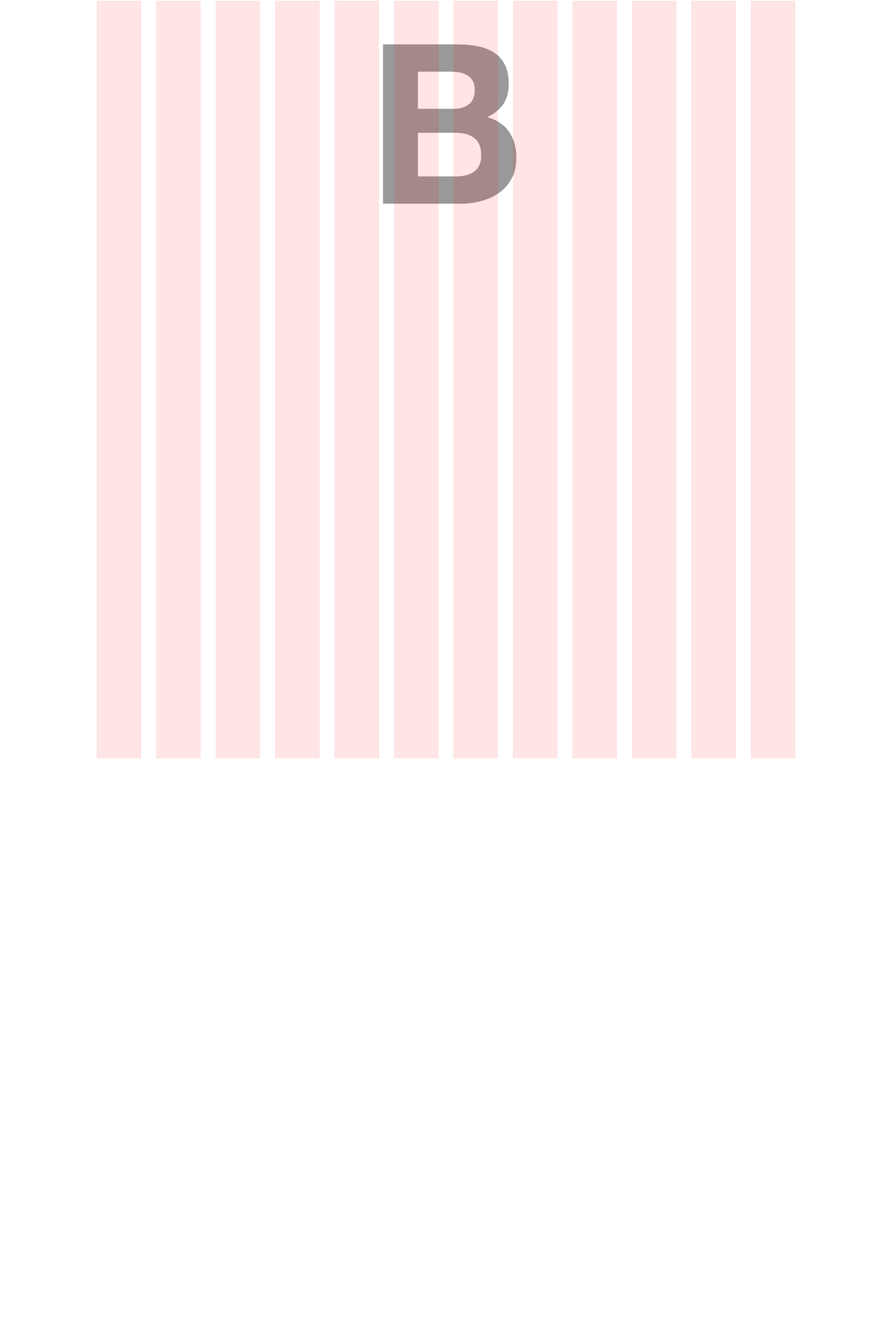
<style>
.page{position:relative;width:892px;height:1337px;background:#ffffff}
.page>*{position:absolute;margin:0}
.t1{font:222.9px "HelveticaNeue-Bold";color:#999999}
</style>
<div class="page">
<p class="t1" style="left:383px;top:44px;width:133px;height:160px">B</p>
</div>
